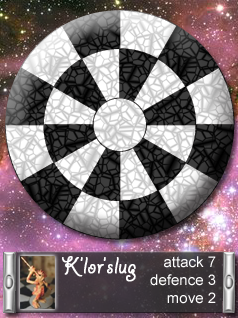
<style>
.page{position:relative;width:238px;height:318px}
.page>*{position:absolute;margin:0}
.t1{font:25px "GiddyupStd";color:#ffffff;font-weight:bold}
.t2{font:15px "ArialMT";color:#ffffff}
</style>
<div class="page">
<p class="t1" style="left:62px;top:256px;width:74px;height:26px">K’lor’slug</p>
<p class="t2" style="left:150px;top:256px;width:66px;height:48px;text-align:right">attack 7<br>defence 3<br>move 2</p>
</div>
